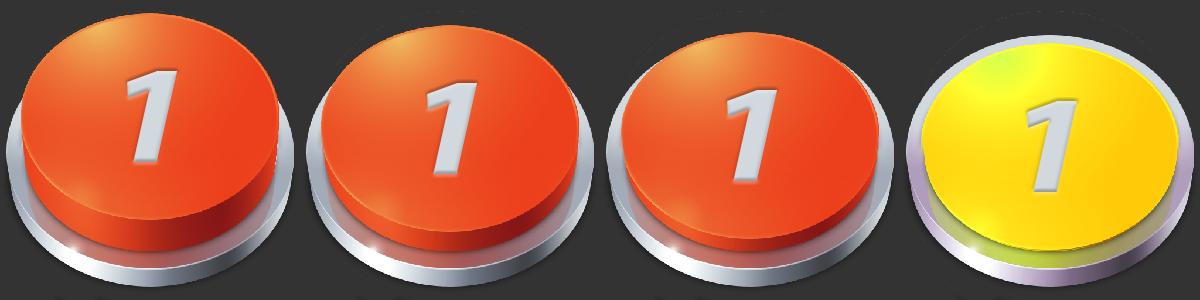
<style>
.page{position:relative;width:1200px;height:300px;background:#333333}
.page>*{position:absolute;margin:0}
.t1{font:139.3px "MyriadPro-BoldIt";color:#d1d8de;scale:1.2 1}
</style>
<div class="page">
<p class="t1" style="left:127px;top:71px;width:50px;height:91px">1</p>
<p class="t1" style="left:427px;top:83px;width:50px;height:91px">1</p>
<p class="t1" style="left:727px;top:90px;width:50px;height:91px">1</p>
<p class="t1" style="left:1027px;top:101px;width:50px;height:91px">1</p>
</div>
